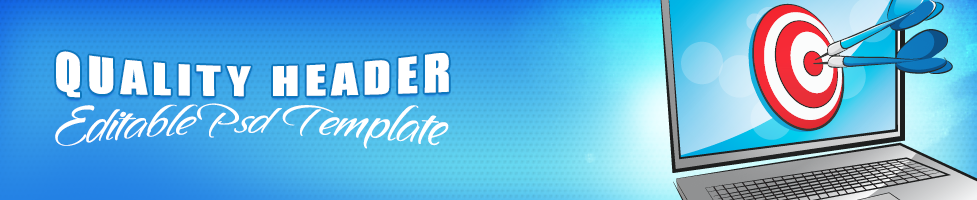
<style>
.page{position:relative;width:977px;height:200px}
.page>*{position:absolute;margin:0}
.t1{font:51.6px "Impact";letter-spacing:0.1em;color:#ffffff;text-transform:uppercase}
.t2{font:50.2px "SandyTextHmkBold";letter-spacing:-0.05em;color:#ffffff;scale:1.07 1}
</style>
<div class="page">
<p class="t1" style="left:56px;top:51px;width:393px;height:47px">quality Header</p>
<p class="t2" style="left:55px;top:103px;width:394px;height:46px">Editable Psd  Template</p>
</div>
